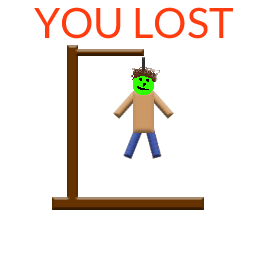
<style>
.page{position:relative;width:256px;height:256px;background:#ffffff}
.page>*{position:absolute;margin:0}
.t1{font:41.7px "Lato-Regular";color:#ff3c0f;text-transform:uppercase}
</style>
<div class="page">
<p class="t1" style="left:34px;top:7px;width:199px;height:32px">You Lost</p>
</div>
